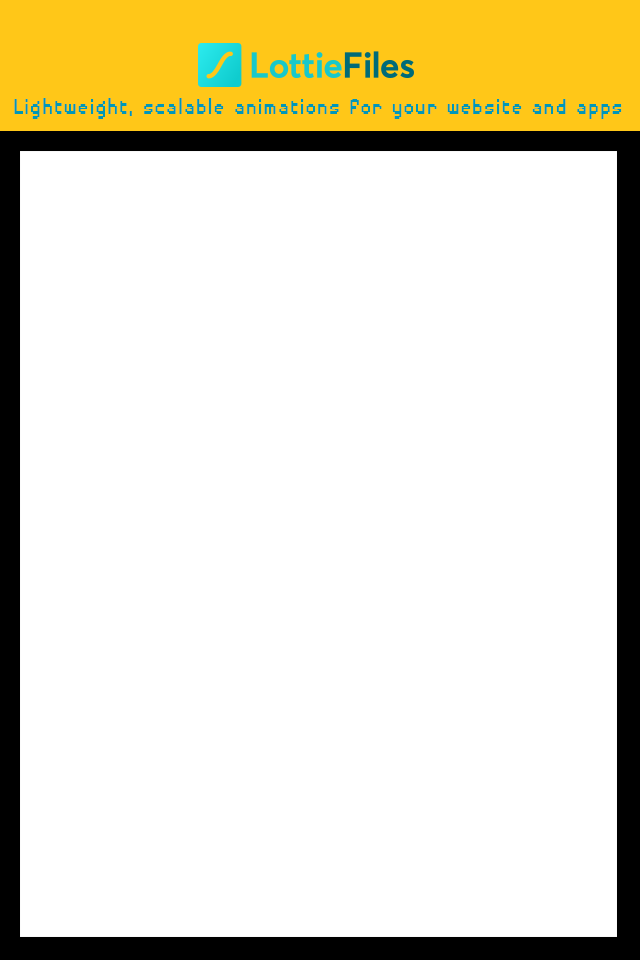
<style>
.page{position:relative;width:640px;height:960px;background:#ffffff}
.page>*{position:absolute;margin:0}
.t1{font:29.2px "DisposableDroidBB";color:#0097b8;scale:0.83 1}
</style>
<div class="page">
<p class="t1" style="left:14px;top:98px;width:608px;height:21px">Lightweight, scalable animations for your website and apps</p>
</div>
